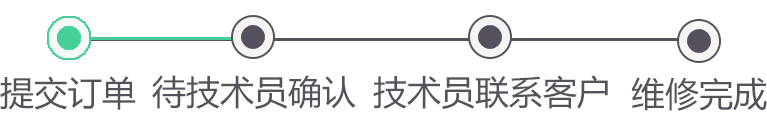
<style>
.page{position:relative;width:767px;height:126px;background:#ffffff}
.page>*{position:absolute;margin:0}
.t1{font:34px "MicrosoftYaHei";color:#57515c}
</style>
<div class="page">
<p class="t1" style="left:0px;top:76px;width:136px;height:34px">提交订单</p>
<p class="t1" style="left:152px;top:75px;width:204px;height:34px">待技术员确认</p>
<p class="t1" style="left:373px;top:75px;width:235px;height:34px">技术员联系客户</p>
<p class="t1" style="left:631px;top:77px;width:136px;height:34px">维修完成</p>
</div>
